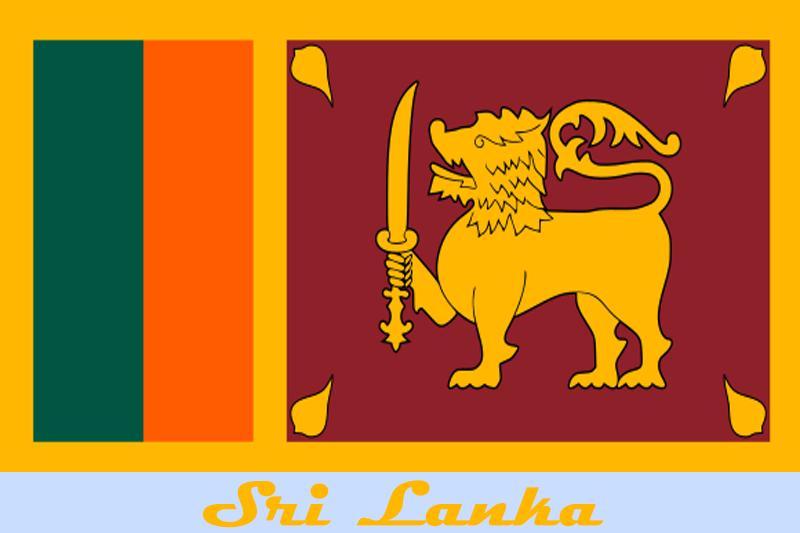
<style>
.page{position:relative;width:800px;height:533px;background:#ffb700}
.page>*{position:absolute;margin:0}
.t1{font:64.5px "Magneto-Bold";color:#ffb700;scale:1.05 1}
</style>
<div class="page">
<p class="t1" style="left:203px;top:480px;width:401px;height:48px">Sri Lanka</p>
</div>
